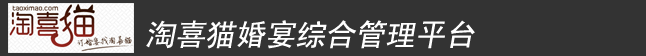
<style>
.page{position:relative;width:646px;height:56px;background:#333333}
.page>*{position:absolute;margin:0}
.t1{font:30px "SimHei";color:#ffffff;font-style:italic}
</style>
<div class="page">
<p class="t1" style="left:146px;top:20px;width:329px;height:29px">淘喜猫婚宴综合管理平台</p>
</div>
